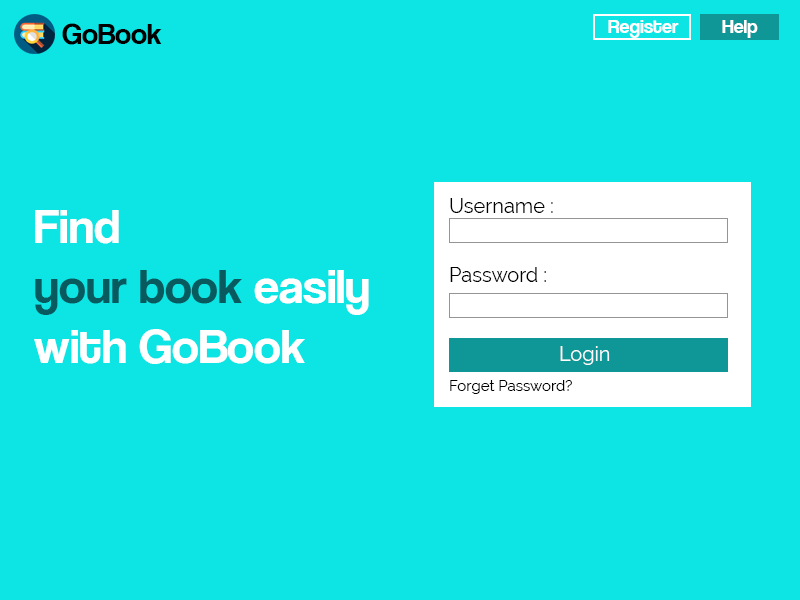
<style>
.page{position:relative;width:800px;height:600px;background:#0de5e5}
.page>*{position:absolute;margin:0}
.t1{font:30px "CoolveticaRg-Regular";color:#000000}
.t2{font:20px "CoolveticaRg-Regular";color:#ffffff}
.t3{font:20px "Raleway";color:#000000}
.t4{font:50px "CoolveticaRg-Regular";color:#ffffff}
.t5{font:50px "CoolveticaRg-Regular";color:#095a5f}
.t6{font:20px "Raleway";color:#ffffff}
.t7{font:15px "Raleway";color:#000000}
</style>
<div class="page">
<p class="t1" style="left:62px;top:23px;width:100px;height:22px">GoBook</p>
<p class="t2" style="left:608px;top:20px;width:71px;height:18px">Register</p>
<p class="t2" style="left:722px;top:20px;width:36px;height:18px">Help</p>
<p class="t3" style="left:450px;top:198px;width:103px;height:15px">Username :</p>
<p class="t4" style="left:34px;top:210px;width:335px;height:154px">Find <br><span class="t5">your book</span> easily <br>with GoBook</p>
<p class="t3" style="left:450px;top:267px;width:96px;height:15px">Password :</p>
<p class="t6" style="left:560px;top:346px;width:50px;height:19px">Login</p>
<p class="t7" style="left:450px;top:380px;width:122px;height:14px">Forget Password?</p>
</div>
